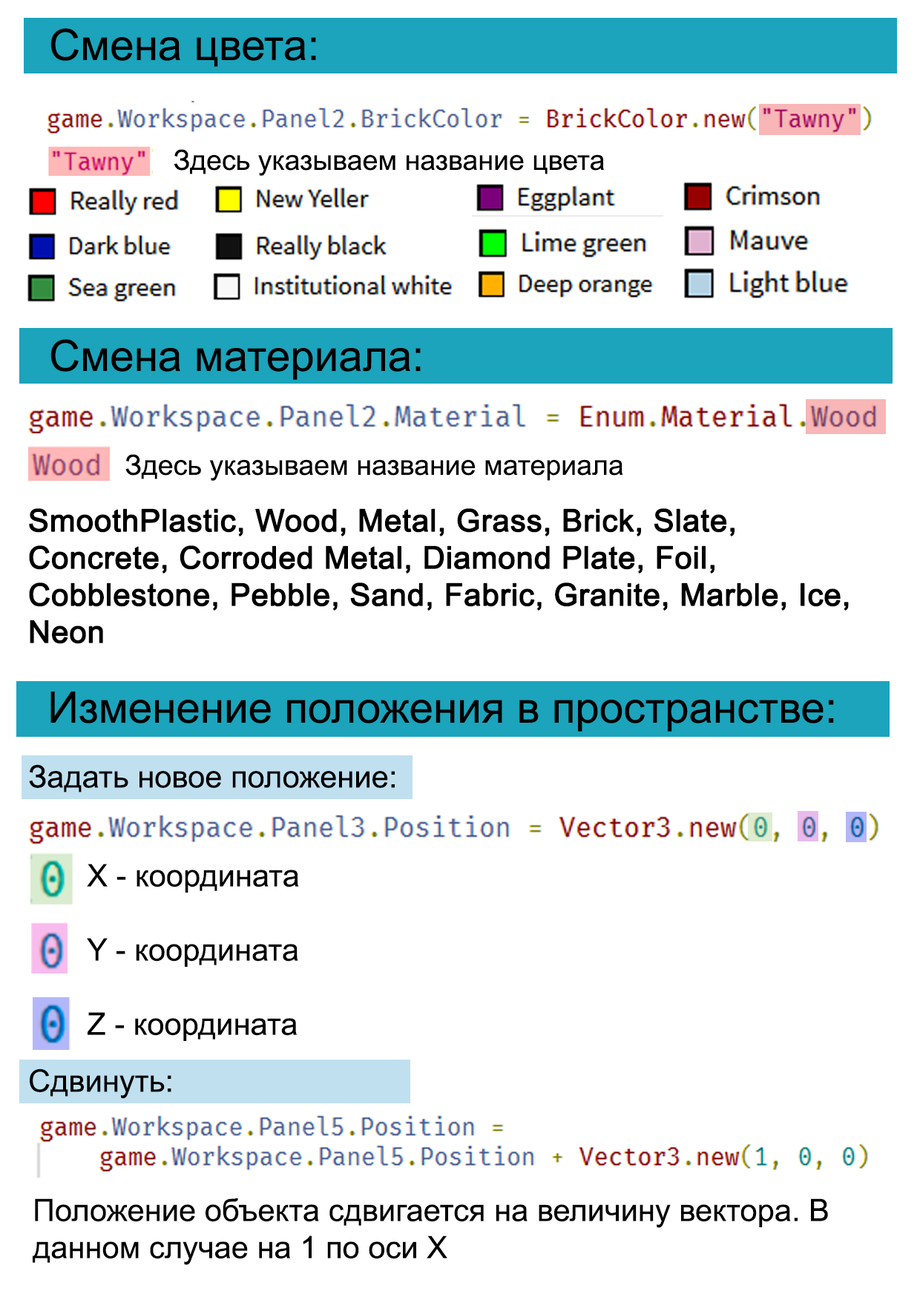
<style>
.page{position:relative;width:920px;height:1297px;background:#ffffff}
.page>*{position:absolute;margin:0}
.t1{font:43.3px "ArialMT";color:#000000}
.t2{font:27.8px "ArialMT";color:#000000}
.t3{font:30.9px "ArialMT";color:#000000;font-weight:bold}
.t4{font:30.9px "ArialMT";color:#000000}
</style>
<div class="page">
<p class="t1" style="left:50px;top:28px;width:266px;height:39px">Смена цвета:</p>
<p class="t2" style="left:174px;top:149px;width:430px;height:27px">Здесь указываем название цвета</p>
<p class="t1" style="left:50px;top:339px;width:371px;height:41px">Смена материала:</p>
<p class="t2" style="left:125px;top:454px;width:498px;height:27px">Здесь указываем название материала</p>
<p class="t3" style="left:29px;top:508px;width:820px;height:136px">SmoothPlastic, Wood, Metal, Grass, Brick, Slate, Concrete, Corroded Metal, Diamond Plate, Foil, Cobblestone, Pebble, Sand, Fabric, Granite, Marble, Ice, Neon</p>
<p class="t1" style="left:50px;top:691px;width:784px;height:40px">Изменение положения в пространстве:</p>
<p class="t4" style="left:29px;top:764px;width:366px;height:28px">Задать новое положение:</p>
<p class="t4" style="left:87px;top:863px;width:212px;height:178px">X - координата<br><br>Y - координата<br><br>Z - координата</p>
<p class="t4" style="left:30px;top:1068px;width:141px;height:30px">Сдвинуть:</p>
<p class="t4" style="left:33px;top:1198px;width:795px;height:67px">Положение объекта сдвигается на величину вектора. В данном случае на 1 по оси Х</p>
</div>
